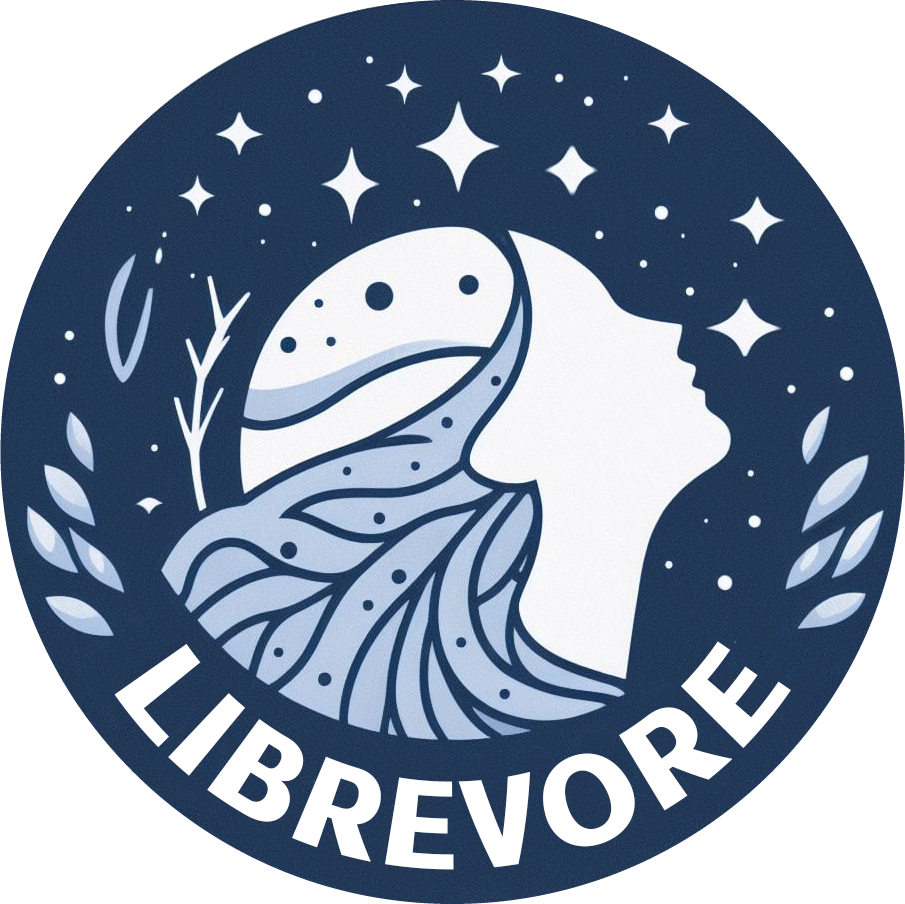
<style>
.page{position:relative;width:905px;height:904px;background:#ffffff}
.page>*{position:absolute;margin:0}
.t1{font:128px "SofiaProCondensed-Bold";color:#ffffff}
</style>
<div class="page">
<p class="t1" style="left:114px;top:641px;width:677px;height:229px">LIBREVORE</p>
</div>
